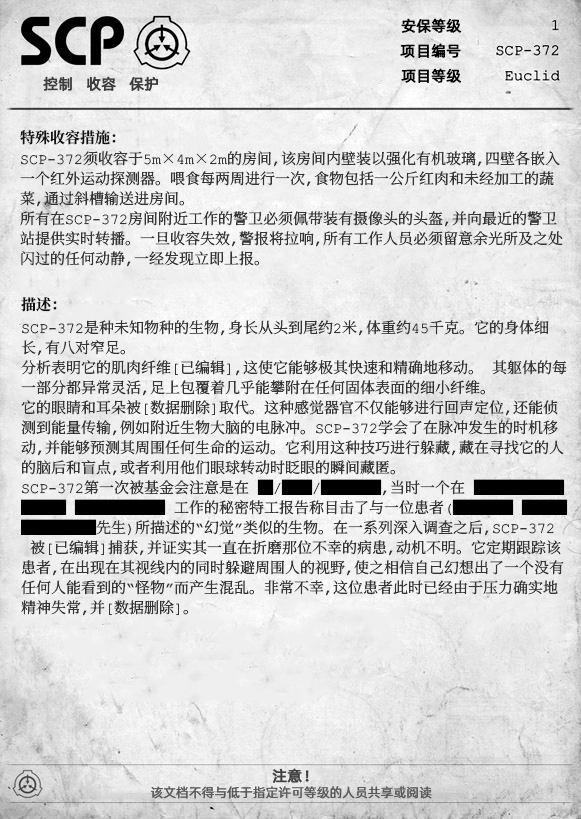
<style>
.page{position:relative;width:581px;height:819px}
.page>*{position:absolute;margin:0}
.t1{font:15px "AlibabaPuHuiTiR";color:#000000;font-weight:bold}
.t2{font:15px "AlibabaPuHuiTiR";color:#3d3d3d;font-weight:bold}
.t3{font:15px "ContainmentBreach-Bold";color:#121212}
.t4{font:15px/20px "ContainmentBreach-Regular";color:#353535}
.t5{font:15px/20px "ContainmentBreach-Regular";color:#000000}
.t6{font:15px "AlibabaPuHuiTiR";color:#414141;font-weight:bold}
.t7{font:13px "AlibabaPuHuiTiR";color:#575757}
</style>
<div class="page">
<p class="t1" style="left:401px;top:18px;width:61px;height:15px">安保等级</p>
<p class="t1" style="left:400px;top:43px;width:61px;height:15px">项目编号</p>
<p class="t2" style="left:43px;top:76px;width:115px;height:15px">控制   收容   保护</p>
<p class="t1" style="left:401px;top:68px;width:61px;height:15px">项目等级</p>
<p class="t3" style="left:20px;top:130px;width:96px;height:15px">特殊收容措施：</p>
<p class="t4" style="left:20px;top:151px;width:543px;height:116px">SCP-372须收容于5m×4m×2m的房间，该房间内壁装以强化有机玻璃，四壁各嵌入<br>一个红外运动探测器。喂食每两周进行一次，食物包括一公斤红肉和未经加工的蔬<br>菜，通过斜槽输送进房间。<br>所有在SCP-372房间附近工作的警卫必须佩带装有摄像头的头盔，并向最近的警卫<br>站提供实时转播。一旦收容失效，警报将拉响，所有工作人员必须留意余光所及之处<br>闪过的任何动静，一经发现立即上报。</p>
<p class="t3" style="left:21px;top:297px;width:36px;height:15px">描述：</p>
<p class="t4" style="left:21px;top:320px;width:547px;height:296px">SCP-372是种未知物种的生物，身长从头到尾约2米，体重约45千克。它的身体细<br>长，有八对窄足。<br>分析表明它的肌肉纤维[已编辑]，这使它能够极其快速和精确地移动。 其躯体的每<br>一部分都异常灵活，足上包覆着几乎能攀附在任何固体表面的细小纤维。<br>它的眼睛和耳朵被[数据删除]取代。这种感觉器官不仅能够进行回声定位，还能侦<br>测到能量传输，例如附近生物大脑的电脉冲。SCP-372学会了在脉冲发生的时机移<br>动，并能够预测其周围任何生命的运动。它利用这种技巧进行躲藏，藏在寻找它的人<br>的脑后和盲点，或者利用他们眼球转动时眨眼的瞬间藏匿。<br>SCP-372第一次被基金会注意是在 <span class="t5">█</span>/<span class="t5">██</span>/<span class="t5">████</span>，当时一个在 <span class="t5">██████<br>███ ██████</span> 工作的秘密特工报告称目击了与一位患者（<span class="t5">████ ███<br>█████</span>先生）所描述的“幻觉”类似的生物。在一系列深入调查之后，SCP-372<br> 被[已编辑]捕获，并证实其一直在折磨那位不幸的病患，动机不明。它定期跟踪该<br>患者，在出现在其视线内的同时躲避周围人的视野，使之相信自己幻想出了一个没有<br>任何人能看到的“怪物”而产生混乱。非常不幸，这位患者此时已经由于压力确实地<br>精神失常，并[数据删除]。</p>
<p class="t6" style="left:272px;top:768px;width:37px;height:15px">注意！</p>
<p class="t7" style="left:151px;top:786px;width:281px;height:13px">该文档不得与低于指定许可等级的人员共享或阅读</p>
</div>
